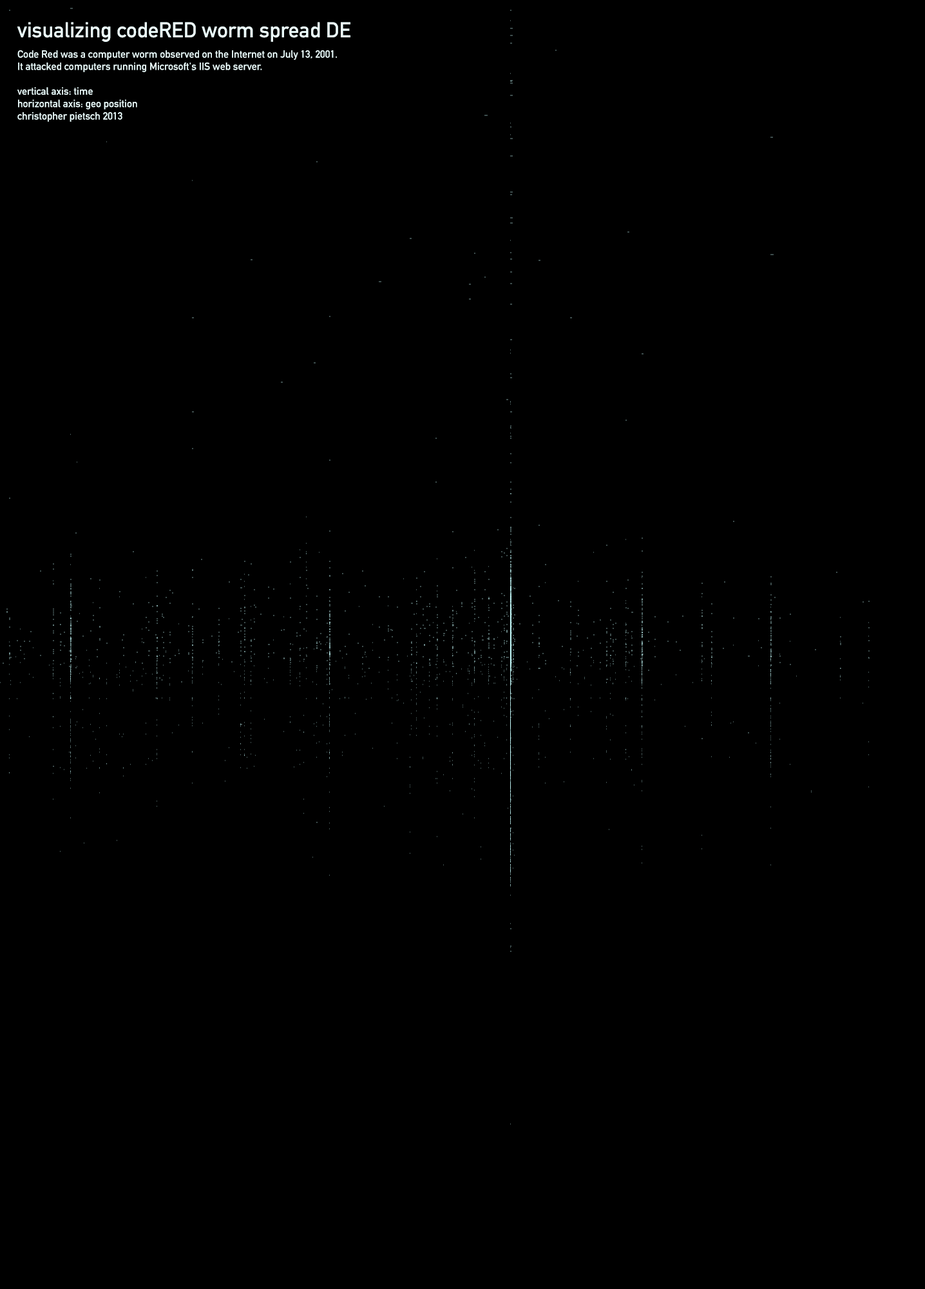
<style>
.page{position:relative;width:925px;height:1289px;background:#000000}
.page>*{position:absolute;margin:0}
.t1{font:21.3px "DINMittelschrift";color:#edffff}
.t2{font:10.3px "DINMittelschrift";color:#edffff}
</style>
<div class="page">
<p class="t1" style="left:17px;top:22px;width:334px;height:20px">visualizing codeRED worm spread DE</p>
<p class="t2" style="left:17px;top:50px;width:320px;height:72px">Code Red was a computer worm observed on the Internet on July 13, 2001.<br>It attacked computers running Microsoft's IIS web server.<br><br>vertical axis: time<br>horizontal axis: geo position<br>christopher pietsch 2013</p>
</div>
